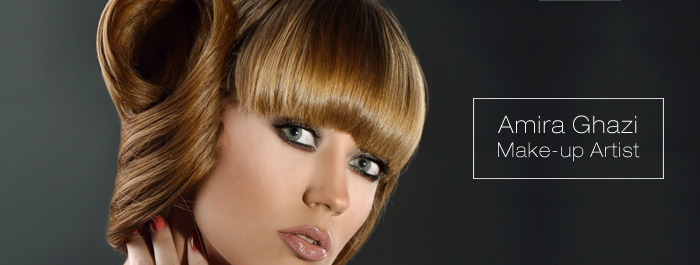
<style>
.page{position:relative;width:700px;height:265px}
.page>*{position:absolute;margin:0}
.t1{font:20px "HelveticaNeueLT-ThinExt";letter-spacing:0.05em;color:#ffffff;scale:0.93 1}
.t2{font:24px "HelveticaNeueLT-ThinExt";letter-spacing:0.05em;color:#ffffff;scale:0.93 1}
</style>
<div class="page">
<p class="t1" style="left:498px;top:115px;width:142px;height:47px;text-align:center"><span class="t2">Amira Ghazi <br></span>Make-up Artist</p>
</div>
